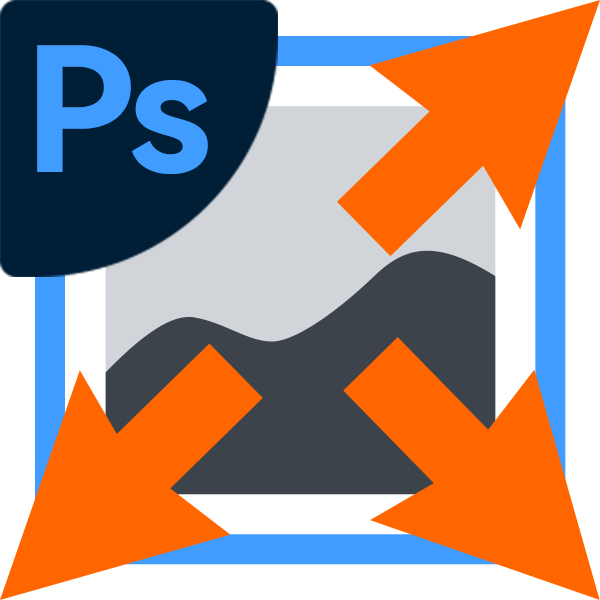
<style>
.page{position:relative;width:600px;height:600px;background:#ff6600}
.page>*{position:absolute;margin:0}
.t1{font:172.8px "HarmonyOS_Sans_SC_Bold";letter-spacing:-0.025em;color:#409cff}
</style>
<div class="page">
<p class="t1" style="left:37px;top:45px;width:171px;height:129px">Ps</p>
</div>
